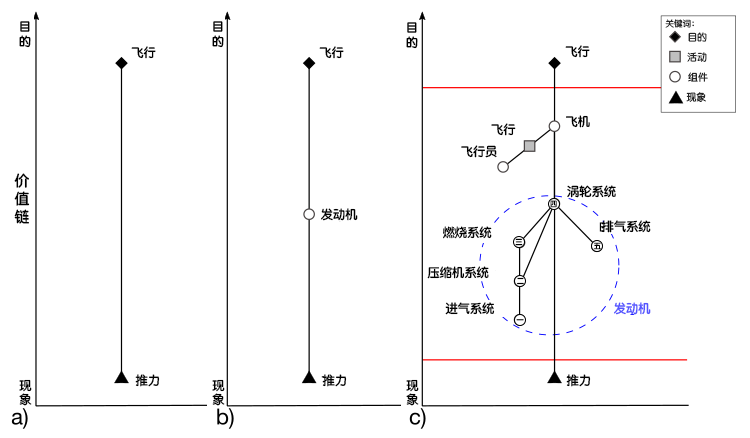
<style>
.page{position:relative;width:750px;height:438px;background:#ffffff}
.page>*{position:absolute;margin:0}
.t1{font:12.2px "STYuanti-SC-Bold";color:#000000}
.t2{font:8.6px "STYuanti-SC-Regular"}
.t3{font:9.8px "STYuanti-SC-Regular"}
.t4{font:14.7px "STYuanti-SC-Bold";color:#000000}
.t5{font:7.3px "STYuanti-SC-Regular";color:#000000}
.t6{font:7.3px "STYuanti-SC-Bold";color:#000000}
.t7{font:12.2px "STYuanti-SC-Bold";color:#5555ff}
.t8{font:7.3px "STYuanti-SC-Bold"}
</style>
<div class="page">
<p class="t1" style="left:19px;top:21px;width:12px;height:27px">目<br>的</p>
<p class="t1" style="left:212px;top:21px;width:12px;height:27px">目<br>的</p>
<p class="t1" style="left:406px;top:22px;width:12px;height:27px">目<br>的</p>
<p class="t2" style="left:665px;top:19px;width:29px;height:9px">关键词：</p>
<p class="t3" style="left:688px;top:32px;width:19px;height:10px">目的</p>
<p class="t1" style="left:131px;top:46px;width:25px;height:13px">飞行</p>
<p class="t1" style="left:319px;top:46px;width:25px;height:13px">飞行</p>
<p class="t1" style="left:565px;top:45px;width:25px;height:13px">飞行</p>
<p class="t3" style="left:687px;top:52px;width:20px;height:10px">活动</p>
<p class="t3" style="left:688px;top:72px;width:20px;height:10px">组件</p>
<p class="t3" style="left:686px;top:92px;width:20px;height:10px">现象</p>
<p class="t1" style="left:491px;top:123px;width:25px;height:13px">飞行</p>
<p class="t1" style="left:566px;top:115px;width:24px;height:13px">飞机</p>
<p class="t1" style="left:461px;top:145px;width:36px;height:13px">飞行员</p>
<p class="t4" style="left:14px;top:173px;width:16px;height:51px">价<br>值<br>链</p>
<p class="t1" style="left:567px;top:185px;width:49px;height:13px">涡轮系统</p>
<p class="t1" style="left:321px;top:208px;width:37px;height:13px">发动机</p>
<p class="t5" style="left:550px;top:200px;width:7px;height:8px">四</p>
<p class="t1" style="left:601px;top:220px;width:50px;height:13px">排气系统</p>
<p class="t1" style="left:443px;top:226px;width:49px;height:13px">燃烧系统</p>
<p class="t5" style="left:515px;top:238px;width:8px;height:8px">三</p>
<p class="t5" style="left:593px;top:242px;width:8px;height:8px">五</p>
<p class="t1" style="left:427px;top:266px;width:62px;height:13px">压缩机系统</p>
<p class="t6" style="left:516px;top:277px;width:8px;height:8px">二</p>
<p class="t1" style="left:445px;top:302px;width:50px;height:13px">进气系统</p>
<p class="t7" style="left:614px;top:302px;width:37px;height:13px">发动机</p>
<p class="t8" style="left:516px;top:319px;width:8px;height:2px">一</p>
<p class="t1" style="left:135px;top:374px;width:25px;height:13px">推力</p>
<p class="t1" style="left:322px;top:374px;width:25px;height:13px">推力</p>
<p class="t1" style="left:566px;top:374px;width:25px;height:13px">推力</p>
<p class="t1" style="left:19px;top:379px;width:13px;height:27px">现<br>象</p>
<p class="t1" style="left:212px;top:379px;width:13px;height:27px">现<br>象</p>
<p class="t1" style="left:406px;top:379px;width:13px;height:27px">现<br>象</p>
</div>
